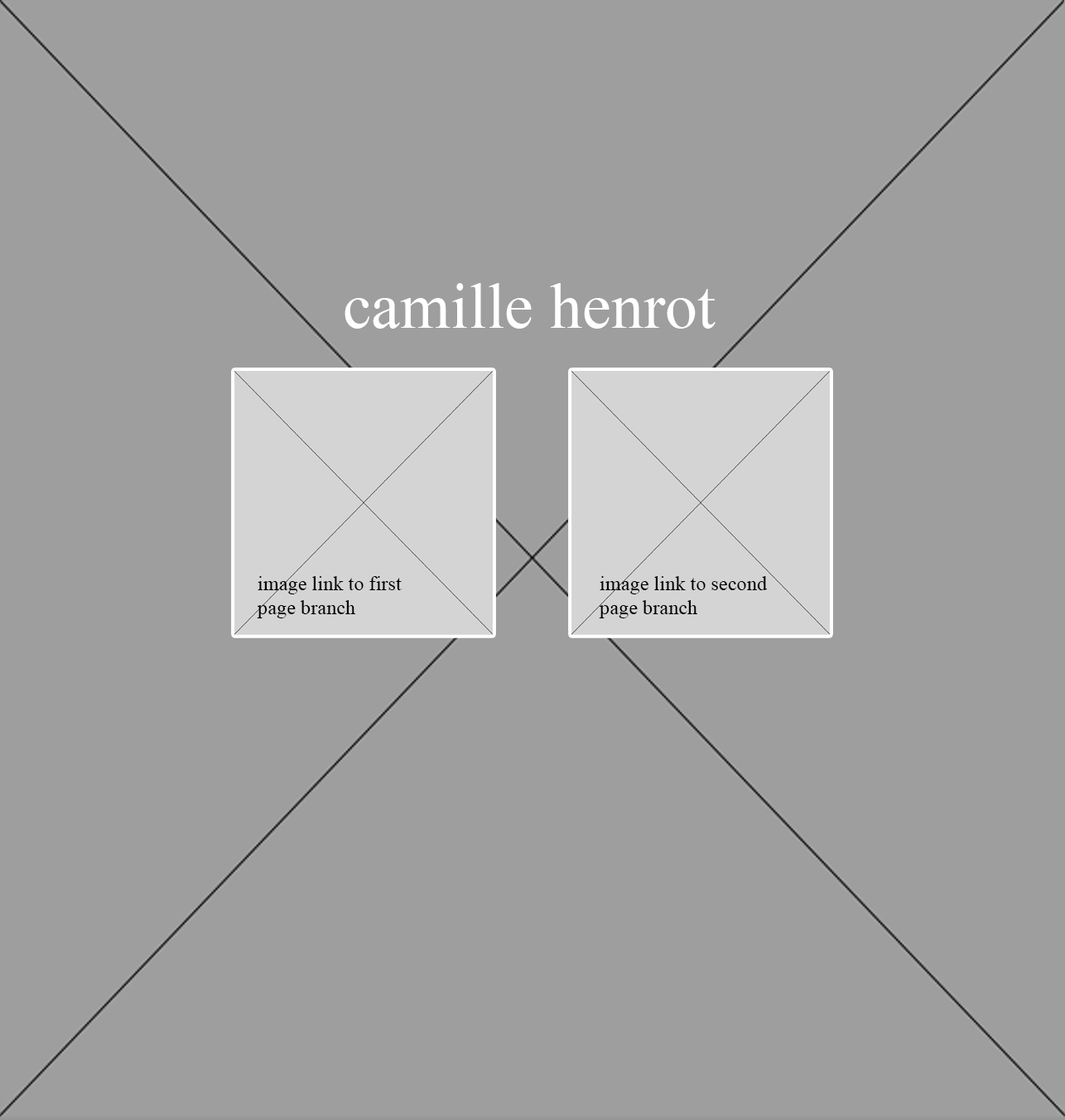
<style>
.page{position:relative;width:1065px;height:1120px;background:#9e9e9e}
.page>*{position:absolute;margin:0}
.t1{font:64.8px "TimesNewRomanPSMT";color:#ffffff}
.t2{font:20.1px "TimesNewRomanPSMT";color:#000000}
</style>
<div class="page">
<p class="t1" style="left:344px;top:283px;width:371px;height:46px">camille henrot</p>
<p class="t2" style="left:257px;top:576px;width:145px;height:42px">image link to first page branch</p>
<p class="t2" style="left:599px;top:576px;width:168px;height:42px">image link to second page branch</p>
</div>
